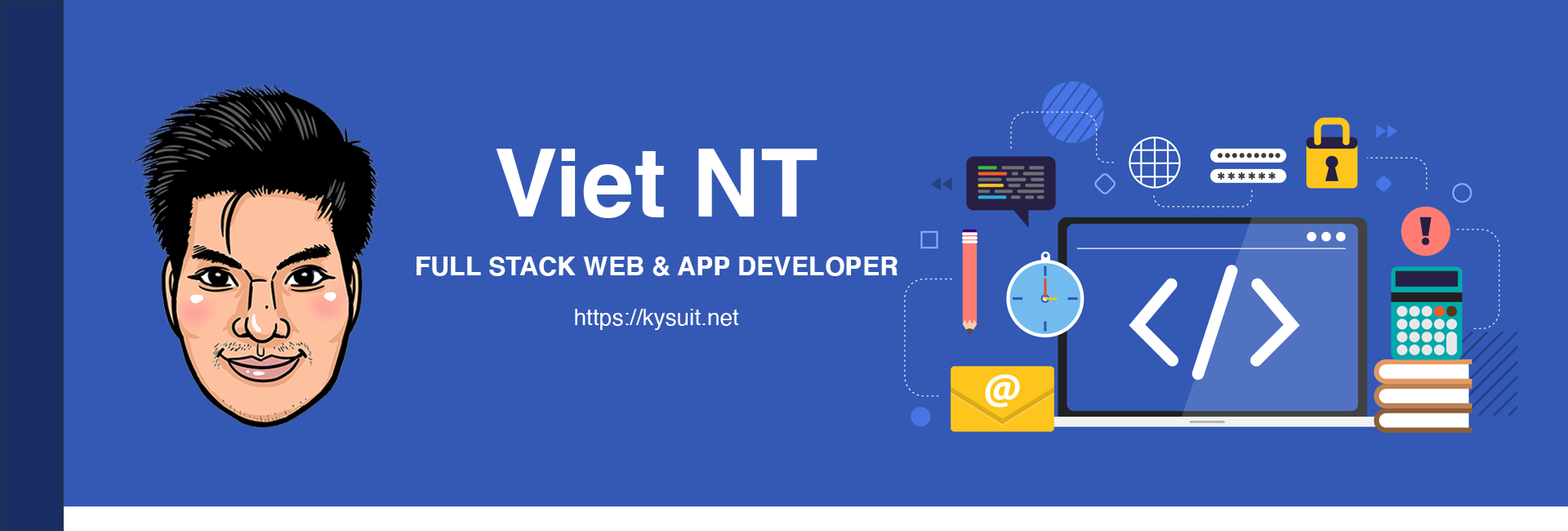
<style>
.page{position:relative;width:1568px;height:531px;background:#3459b4}
.page>*{position:absolute;margin:0}
.t1{font:94.4px "Helvetica-Bold";color:#ffffff}
.t2{font:26.1px "Helvetica-Bold";color:#ffffff;text-transform:uppercase}
.t3{font:22.9px "Helvetica";color:#ffffff}
</style>
<div class="page">
<p class="t1" style="left:496px;top:149px;width:321px;height:69px">Viet NT</p>
<p class="t2" style="left:416px;top:256px;width:482px;height:20px">Full Stack Web &amp; App Developer</p>
<p class="t3" style="left:575px;top:309px;width:164px;height:21px">https://kysuit.net</p>
</div>
